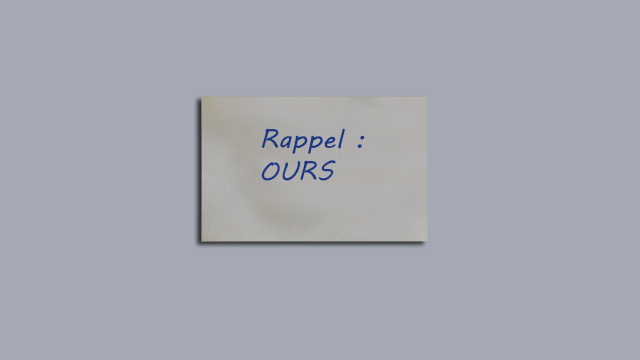
<style>
.page{position:relative;width:640px;height:360px;background:#a5a9b3}
.page>*{position:absolute;margin:0}
.t1{font:26px "MVBoli";color:#1b3786;scale:1.05 1}
</style>
<div class="page">
<p class="t1" style="left:261px;top:128px;width:104px;height:53px">Rappel :<br>OURS</p>
</div>
